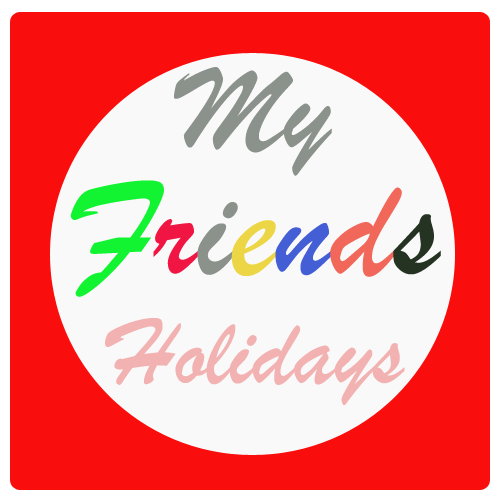
<style>
.page{position:relative;width:500px;height:500px;background:#f90d0d}
.page>*{position:absolute;margin:0}
.t1{font:125px "BrushScriptMT";color:#8b928c}
.t2{font:150px "BrushScriptMT";color:#12f432}
.t3{font:150px "BrushScriptMT";color:#f01543}
.t4{font:150px "BrushScriptMT";color:#8b928c}
.t5{font:150px "BrushScriptMT";color:#ecd645}
.t6{font:150px "BrushScriptMT";color:#445fd5}
.t7{font:150px "BrushScriptMT";color:#f16759}
.t8{font:150px "BrushScriptMT";color:#243322}
.t9{font:100px "BrushScriptMT";color:#f3b2b2}
</style>
<div class="page">
<p class="t1" style="left:174px;top:67px;width:158px;height:109px">My</p>
<p class="t2" style="left:70px;top:180px;width:371px;height:117px">F<span class="t3">r</span><span class="t4">i</span><span class="t5">e</span><span class="t6">n</span><span class="t7">d</span><span class="t8">s</span></p>
<p class="t9" style="left:105px;top:318px;width:300px;height:88px">Holidays</p>
</div>
